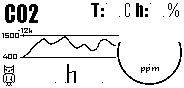
<style>
.page{position:relative;width:184px;height:88px;background:#ffffff}
.page>*{position:absolute;margin:0}
.t1{font:24.1px "Impact";color:#000000;scale:0.92 1}
.t2{font:17.5px "AgencyFB-Reg";color:#000000}
.t3{font:17.5px "Impact";color:#000000}
.t4{font:7.3px "AgencyFB-Reg";color:#000000;scale:1.76 1}
.t5{font:7.3px "AgencyFB-Reg";color:#000000;scale:1.61 1}
.t6{font:8.3px "AgencyFB-Reg";color:#000000;scale:1.74 1}
</style>
<div class="page">
<p class="t1" style="left:5px;top:4px;width:33px;height:19px">CO2</p>
<p class="t2" style="left:91px;top:3px;width:39px;height:14px"><span class="t3">T: </span>25 C</p>
<p class="t2" style="left:136px;top:3px;width:43px;height:14px"><span class="t3">h: </span>46 %</p>
<p class="t4" style="left:2px;top:33px;width:17px;height:5px">1500</p>
<p class="t5" style="left:3px;top:54px;width:14px;height:5px">400</p>
<p class="t6" style="left:141px;top:67px;width:18px;height:6px">ppm</p>
</div>
